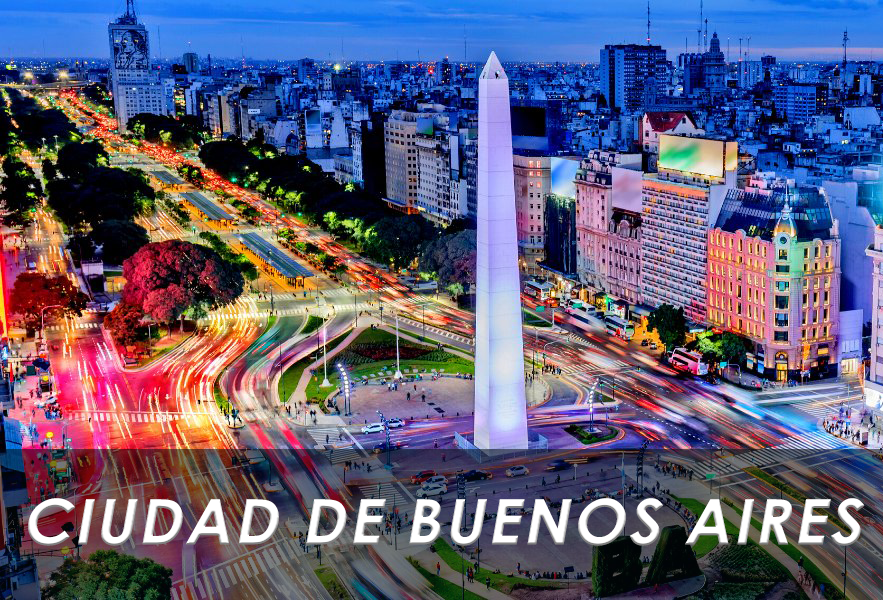
<style>
.page{position:relative;width:883px;height:600px}
.page>*{position:absolute;margin:0}
.t1{font:62.5px "CenturyGothic-Bold";letter-spacing:0.05em;color:#ffffff;font-style:italic}
</style>
<div class="page">
<p class="t1" style="left:28px;top:498px;width:837px;height:48px">CIUDAD DE BUENOS AIRES</p>
</div>
